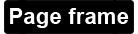
<style>
.page{position:relative;width:138px;height:34px;background:#000000}
.page>*{position:absolute;margin:0}
.t1{font:22.1px "Arial-BoldMT";color:#ffffff}
</style>
<div class="page">
<p class="t1" style="left:10px;top:8px;width:119px;height:20px">Page frame</p>
</div>
